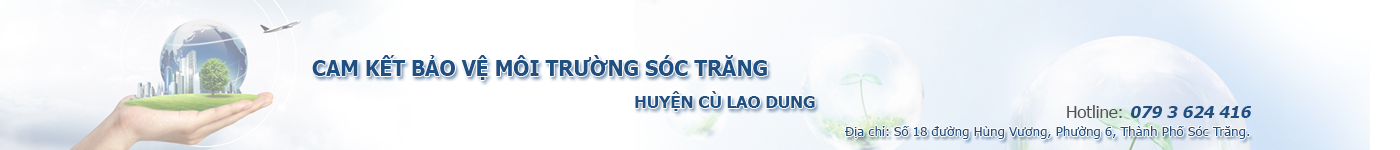
<style>
.page{position:relative;width:1400px;height:150px}
.page>*{position:absolute;margin:0}
.t1{font:20.8px "Tahoma-Bold";color:#205081}
.t2{font:16.7px "Tahoma-Bold";color:#205081}
.t3{font:16.7px "Tahoma-Bold";color:#205081;font-style:italic}
.t4{font:16.7px "Tahoma";color:#565252}
.t5{font:13.3px "Tahoma";color:#205081}
</style>
<div class="page">
<p class="t1" style="left:312px;top:55px;width:455px;height:25px">CAM KẾT BẢO VỆ MÔI TRƯỜNG SÓC TRĂNG</p>
<p class="t2" style="left:635px;top:91px;width:180px;height:20px">HUYỆN CÙ LAO DUNG</p>
<p class="t3" style="left:1067px;top:105px;width:184px;height:13px"><span class="t4">Hotline: </span>079 3 624 416</p>
<p class="t5" style="left:845px;top:126px;width:405px;height:13px">Địa chỉ: Số 18 đường Hùng Vương, Phường 6, Thành Phố Sóc Trăng.</p>
</div>
